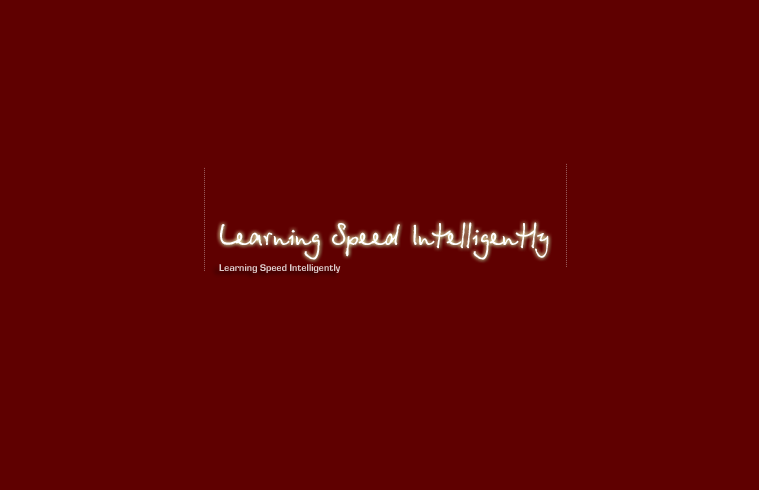
<style>
.page{position:relative;width:759px;height:490px;background:#5f0000}
.page>*{position:absolute;margin:0}
.t1{font:32px "BetinaScript";color:#ffffff}
.t2{font:9px "EuropeDemiNormal";color:#dfcccc}
</style>
<div class="page">
<p class="t1" style="left:220px;top:222px;width:329px;height:38px">Learning Speed Intelligently</p>
<p class="t2" style="left:219px;top:264px;width:122px;height:9px">Learning Speed Intelligently</p>
</div>
